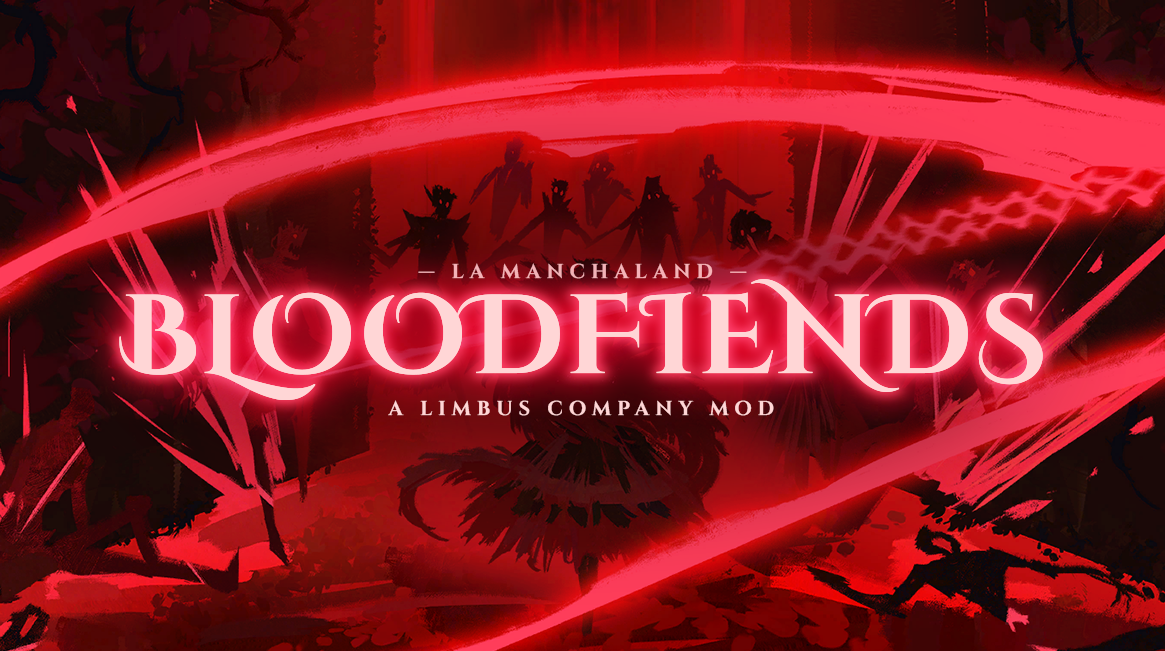
<style>
.page{position:relative;width:1165px;height:651px}
.page>*{position:absolute;margin:0}
.t1{font:20px "CinzelRoman-Bold";letter-spacing:0.3em;color:#ffbec3}
.t2{font:112px "CinzelDecorative-Bold";letter-spacing:0.03em;color:#ffd6d6}
.t3{font:20px "CinzelRoman-Bold";letter-spacing:0.3em;color:#ffd6d6}
</style>
<div class="page">
<p class="t1" style="left:418px;top:263px;width:329px;height:16px;opacity:0.9">— LA MANCHALAND —</p>
<p class="t2" style="left:119px;top:279px;width:924px;height:121px">BLOODFIENDS</p>
<p class="t2" style="left:119px;top:279px;width:924px;height:121px">BLOODFIENDS</p>
<p class="t3" style="left:388px;top:400px;width:386px;height:16px">A LIMBUS COMPANY MOD</p>
</div>
